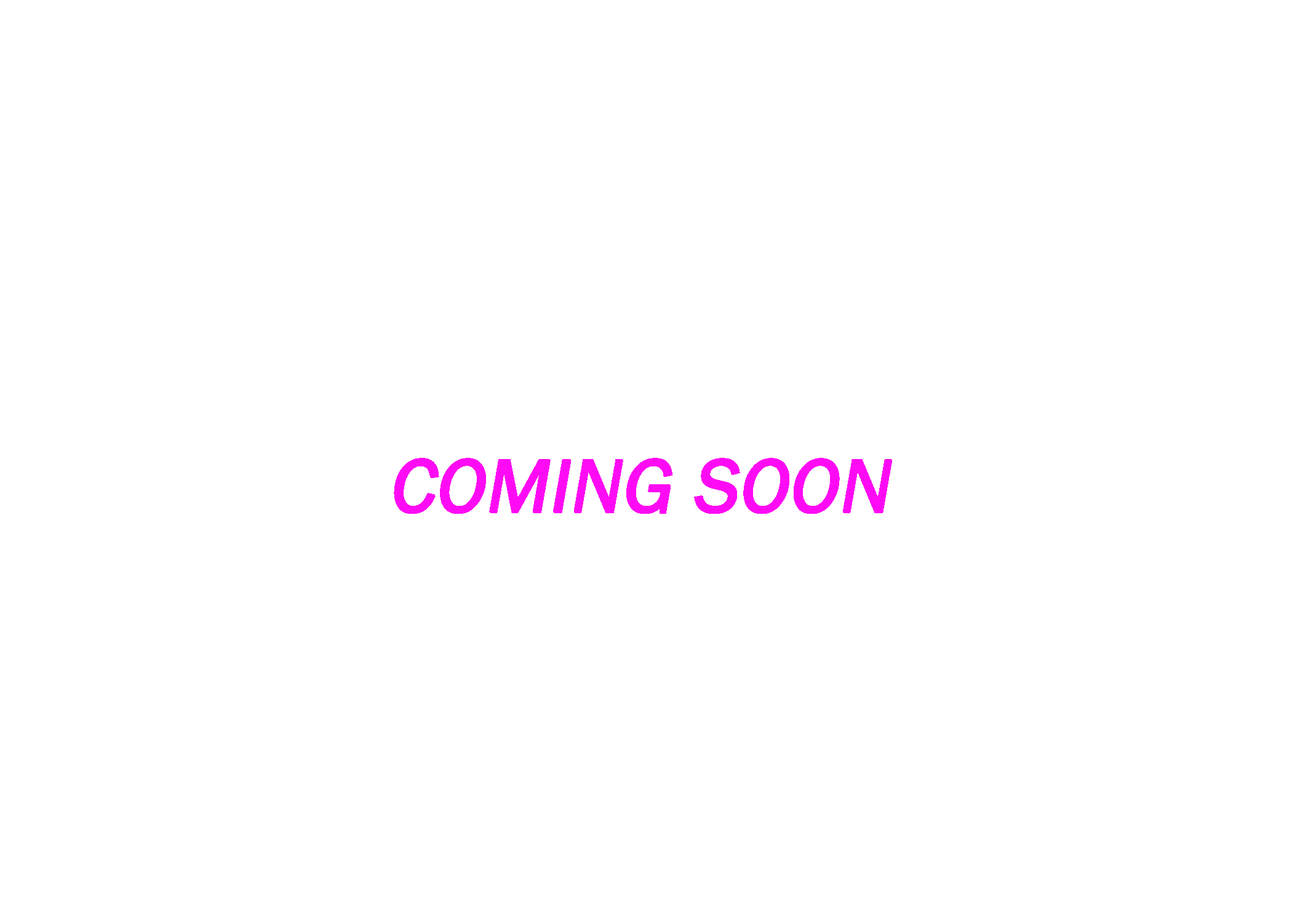
<style>
.page{position:relative;width:1292px;height:923px;background:#ffffff}
.page>*{position:absolute;margin:0}
.t1{font:76.9px "FranklinGothic-Book";letter-spacing:-0.01em;color:#ff0af4;text-transform:uppercase;font-weight:bold;font-style:italic}
</style>
<div class="page">
<p class="t1" style="left:394px;top:458px;width:498px;height:56px">Coming Soon</p>
</div>
